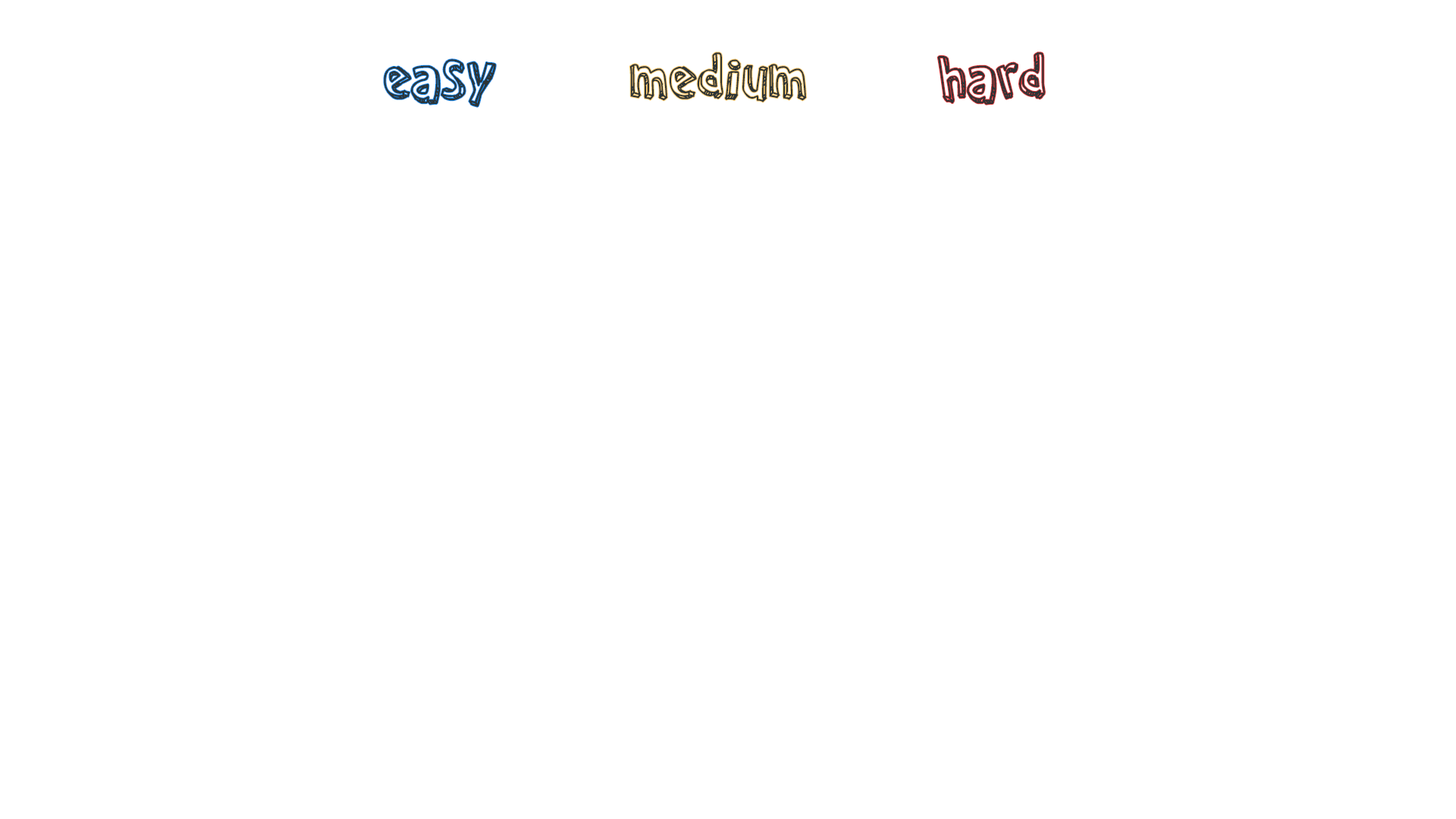
<style>
.page{position:relative;width:1456px;height:819px;background:#ffffff}
.page>*{position:absolute;margin:0}
.t1{font:66.4px "CartoonRelief";color:#2d3436}
</style>
<div class="page">
<p class="t1" style="left:629px;top:52px;width:177px;height:50px">medium</p>
<p class="t1" style="left:937px;top:52px;width:108px;height:53px">hard</p>
<p class="t1" style="left:384px;top:59px;width:112px;height:48px">easy</p>
</div>
